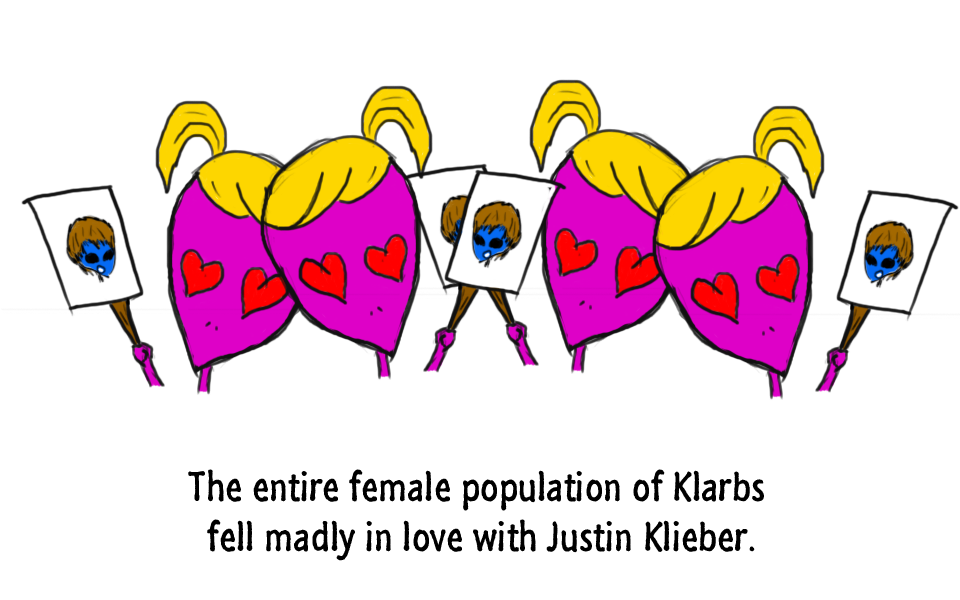
<style>
.page{position:relative;width:960px;height:600px;background:#ffffff}
.page>*{position:absolute;margin:0}
.t1{font:42px "SegoeMarker";color:#000000}
</style>
<div class="page">
<p class="t1" style="left:188px;top:469px;width:576px;height:92px;text-align:center">The entire female population of Klarbs <br>fell madly in love with Justin Klieber.</p>
</div>
